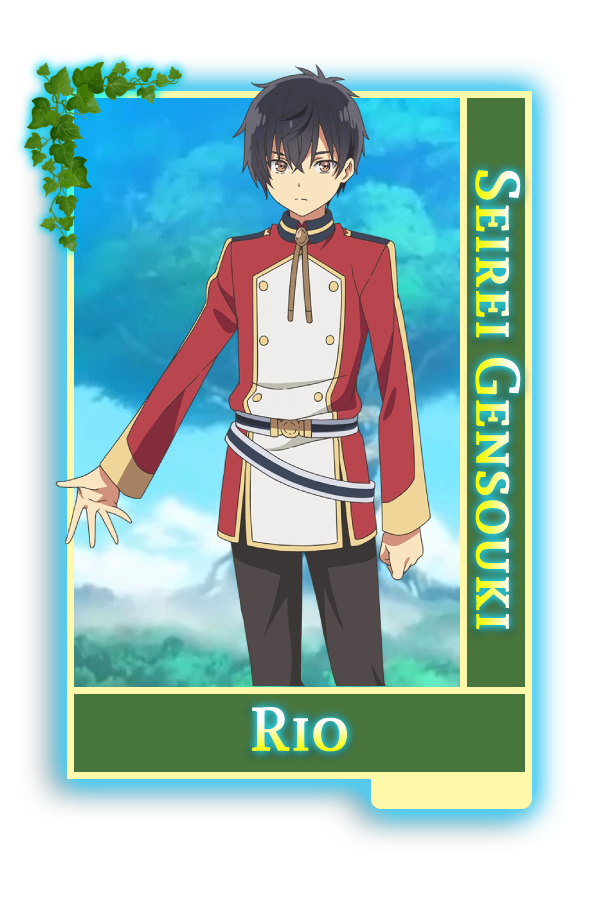
<style>
.page{position:relative;width:600px;height:900px;background:#ffffff}
.page>*{position:absolute;margin:0}
.t1{font:61px "AndadaSC-Regular";font-weight:bold}
</style>
<div class="page">
<p class="t1" style="left:475px;top:170px;width:46px;height:460px;rotate:90deg">Seirei Gensouki</p>
<p class="t1" style="left:251px;top:707px;width:97px;height:45px">Rio</p>
</div>
